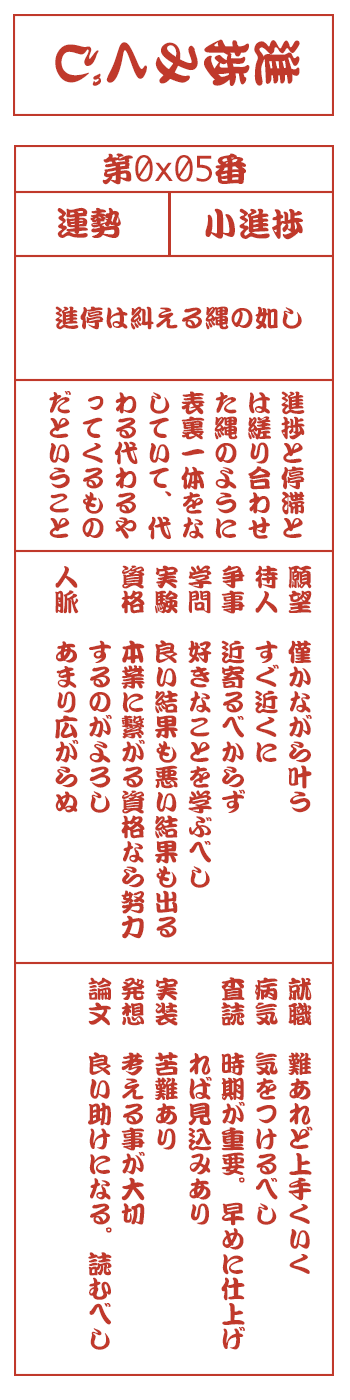
<style>
.page{position:relative;width:350px;height:1400px;background:#ffffff}
.page>*{position:absolute;margin:0}
.t1{font:50px "DFKanTeiRyu-XB-MP-RKSJ-H";color:#c0392b}
.t2{font:33.3px "Monaco";color:#c0392b}
.t3{font:33.3px "DFKanTeiRyu-XB-MP-RKSJ-H";color:#c0392b}
.t4{font:25px "DFKanTeiRyu-XB-MP-RKSJ-H";color:#c0392b}
.t5{font:25px/33.3px "DFKanTeiRyu-XB-MP-RKSJ-H";color:#c0392b}
</style>
<div class="page">
<p class="t1" style="left:55px;top:39px;width:245px;height:47px;rotate:90deg">進捗みくじ</p>
<p class="t2" style="left:102px;top:153px;width:144px;height:32px"><span class="t3">第</span>0x05<span class="t3">番</span></p>
<p class="t3" style="left:57px;top:207px;width:64px;height:31px">運勢</p>
<p class="t3" style="left:205px;top:208px;width:98px;height:32px">小進捗</p>
<p class="t4" style="left:55px;top:306px;width:247px;height:24px">進停は糾える縄の如し</p>
<p class="t5" style="left:49px;top:391px;width:256px;height:149px">進捗と停滞と<br>は縒り合わせ<br>た縄のように<br>表裏一体をな<br>していて、代<br>わる代わるや<br>ってくるもの<br>だということ</p>
<p class="t5" style="left:55px;top:565px;width:257px;height:374px">願望　僅かながら叶う<br>待人　すぐ近くに<br>争事　近寄るべからず<br>学問　好きなことを学ぶべし<br>実験　良い結果も悪い結果も出る<br>資格　本業に繋がる資格なら努力<br>　　　するのがよろし<br>人脈　あまり広がらぬ</p>
<p class="t5" style="left:88px;top:977px;width:225px;height:373px">就職　難あれど上手くいく<br>病気　気をつけるべし<br>査読　時期が重要。早めに仕上げ<br>　　　れば見込みあり<br>実装　苦難あり<br>発想　考える事が大切<br>論文　良い助けになる。読むべし</p>
</div>
